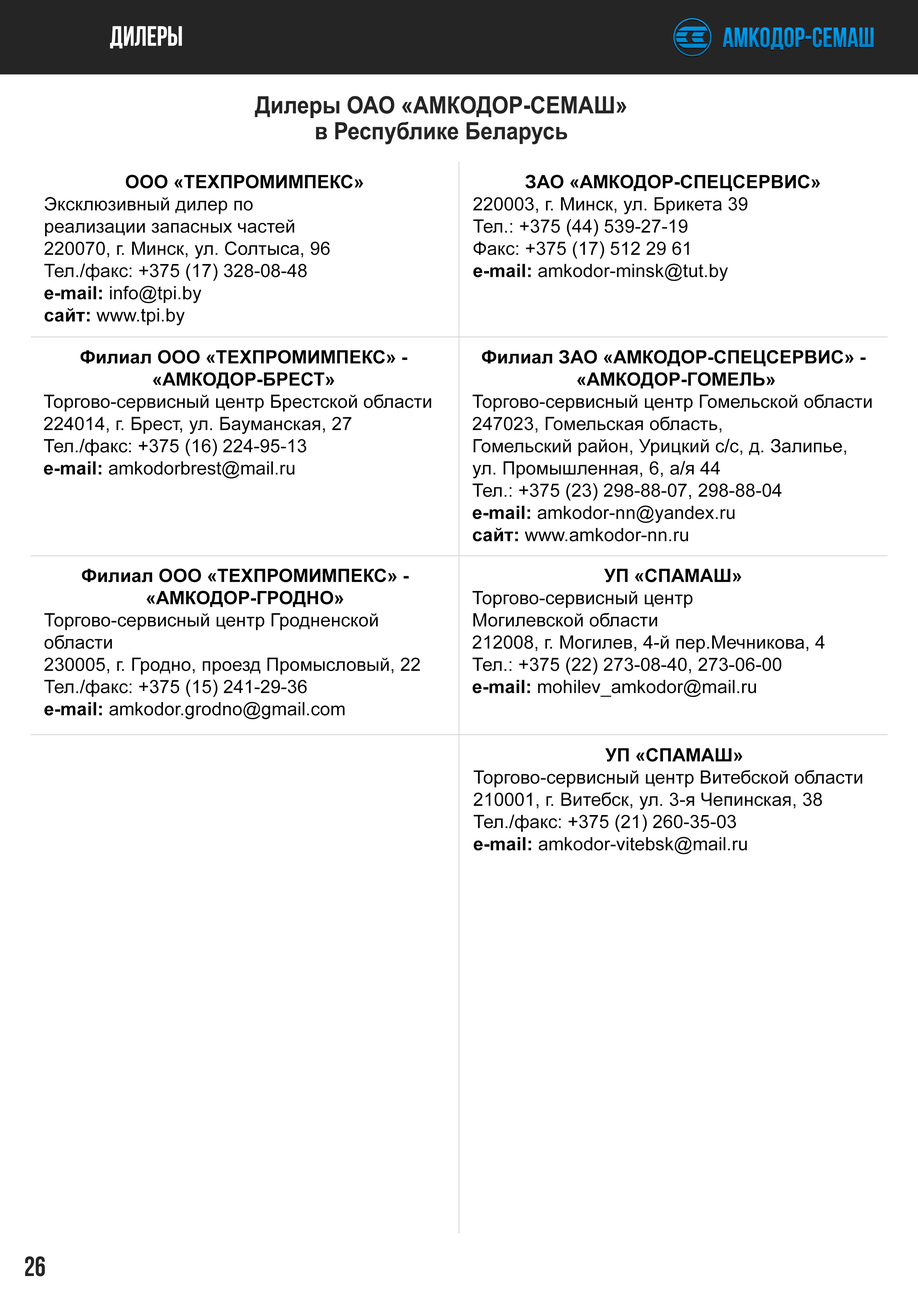
<style>
.page{position:relative;width:918px;height:1299px;background:#ffffff}
.page>*{position:absolute;margin:0}
.t1{font:27.8px "BebasNeueBold";color:#ffffff}
.t2{font:27.8px "BebasNeueBold";color:#0090dc}
.t3{font:23.8px "Arial-BoldMT";color:#252525;scale:0.91 1}
.t4{font:18.5px "ArialMT";color:#000000}
.t5{font:18.5px "Arial-BoldMT";color:#000000}
.t6{font:18.5px "Arial-BoldMT";color:#000000;text-transform:uppercase}
.t7{font:27.8px "BebasNeueBold";color:#252525}
</style>
<div class="page">
<p class="t1" style="left:110px;top:26px;width:72px;height:22px">дилеры</p>
<p class="t2" style="left:723px;top:27px;width:151px;height:23px">амкодор-семаш</p>
<p class="t3" style="left:255px;top:96px;width:372px;height:48px;text-align:center">Дилеры ОАО «АМКОДОР-СЕМАШ»<br>в Республике Беларусь</p>
<p class="t4" style="left:44px;top:175px;width:319px;height:150px;text-align:center"><span class="t5">ООО «</span><span class="t6">Техпромимпекс</span><span class="t5">»<br></span>Эксклюзивный дилер по<br>реализации запасных частей<br>220070, г. Минск, ул. Солтыса, 96<br>Тел./факс: +375 (17) 328-08-48<br><span class="t5">e-mail:</span> info@tpi.by <br><span class="t5">сайт:</span> www.tpi.by</p>
<p class="t4" style="left:473px;top:175px;width:347px;height:106px;text-align:center"><span class="t6">ЗАО «Амкодор-Спецсервис»<br></span>220003, г. Минск, ул. Брикета 39<br>Тел.: +375 (44) 539-27-19<br>Факс: +375 (17) 512 29 61<br><span class="t5">e-mail:</span> amkodor-minsk@tut.by</p>
<p class="t4" style="left:44px;top:350px;width:387px;height:128px;text-align:center"><span class="t5">Филиал ООО «</span><span class="t6">Техпромимпекс</span><span class="t5">» -<br>«</span><span class="t6">Амкодор-Брест</span><span class="t5">»<br></span>Торгово-сервисный центр Брестской области<br>224014, г. Брест, ул. Бауманская, 27<br>Тел./факс: +375 (16) 224-95-13<br><span class="t5">e-mail:</span> amkodorbrest@mail.ru</p>
<p class="t4" style="left:472px;top:350px;width:400px;height:191px;text-align:center"><span class="t5">Филиал </span><span class="t6">ЗАО «Амкодор-Спецсервис» -<br> «Амкодор-Гомель»<br></span>Торгово-сервисный центр Гомельской области<br>247023, Гомельская область,<br>Гомельский район, Урицкий с/с, д. Залипье,<br>ул. Промышленная, 6, а/я 44<br>Тел.: +375 (23) 298-88-07, 298-88-04<br><span class="t5">e-mail:</span> amkodor-nn@yandex.ru<br><span class="t5">сайт:</span> www.amkodor-nn.ru</p>
<p class="t4" style="left:44px;top:568px;width:376px;height:151px;text-align:center"><span class="t5">Филиал ООО «</span><span class="t6">Техпромимпекс</span><span class="t5">» -<br>«</span><span class="t6">Амкодор-Гродно</span><span class="t5">»<br></span>Торгово-сервисный центр Гродненской области<br>230005, г. Гродно, проезд Промысловый, 22<br>Тел./факс: +375 (15) 241-29-36<br><span class="t5">e-mail:</span> amkodor.grodno@gmail.com</p>
<p class="t4" style="left:472px;top:568px;width:353px;height:129px;text-align:center"><span class="t5">УП «</span><span class="t6">Спамаш»<br></span>Торгово-сервисный центр<br>Могилевской области<br>212008, г. Могилев, 4-й пер.Мечникова, 4<br>Тел.: +375 (22) 273-08-40, 273-06-00<br><span class="t5">e-mail:</span> mohilev_amkodor@mail.ru</p>
<p class="t4" style="left:474px;top:748px;width:389px;height:106px;text-align:center"><span class="t5">УП «</span><span class="t6">Спамаш</span><span class="t5">»<br></span>Торгово-сервисный центр Витебской области<br>210001, г. Витебск, ул. 3-я Чепинская, 38<br>Тел./факс: +375 (21) 260-35-03<br><span class="t5">e-mail:</span> amkodor-vitebsk@mail.ru</p>
<p class="t7" style="left:25px;top:1256px;width:20px;height:20px">26</p>
</div>
